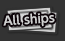
<style>
.page{position:relative;width:65px;height:41px;background:#333333}
.page>*{position:absolute;margin:0}
.t1{font:12px "UDShinGoPro-DeBold";color:#d2d2d2}
</style>
<div class="page">
<p class="t1" style="left:3px;top:13px;width:52px;height:14px;rotate:-4deg">All ships</p>
</div>
